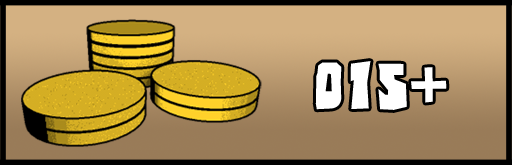
<style>
.page{position:relative;width:512px;height:165px}
.page>*{position:absolute;margin:0}
.t1{font:60px "Eastwood";color:#ffffff}
</style>
<div class="page">
<p class="t1" style="left:315px;top:61px;width:132px;height:49px">015+</p>
</div>
